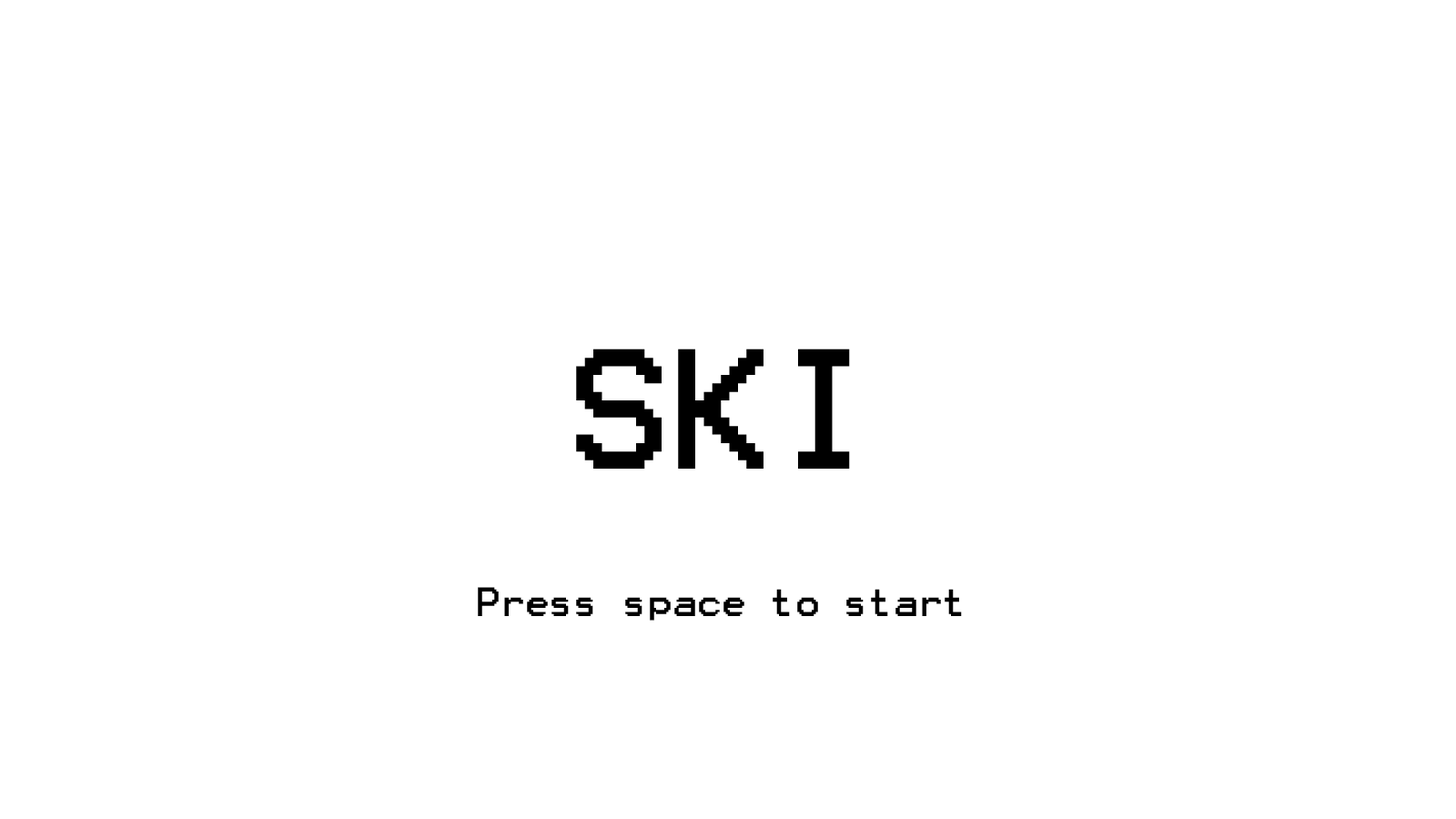
<style>
.page{position:relative;width:1456px;height:819px;background:#ffffff}
.page>*{position:absolute;margin:0}
.t1{font:136.5px "Terminal";color:#000000}
.t2{font:32.8px "Terminal";color:#000000}
</style>
<div class="page">
<p class="t1" style="left:576px;top:349px;width:274px;height:120px">SKI</p>
<p class="t2" style="left:478px;top:587px;width:484px;height:34px">Press space to start</p>
</div>
